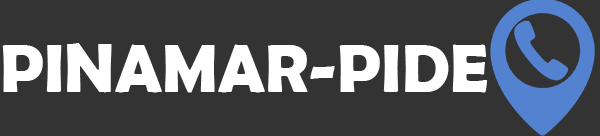
<style>
.page{position:relative;width:600px;height:136px;background:#333333}
.page>*{position:absolute;margin:0}
.t1{font:68px "BerlinSansFBDemi-Bold";color:#ffffff}
</style>
<div class="page">
<p class="t1" style="left:2px;top:43px;width:485px;height:50px">PINAMAR-PIDE</p>
</div>
